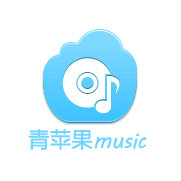
<style>
.page{position:relative;width:181px;height:181px;background:#ffffff}
.page>*{position:absolute;margin:0}
.t1{font:22px "MVBoli";letter-spacing:-0.02em;color:#72d4ff}
.t2{font:22px "AdobeFanHeitiStd-Bold";letter-spacing:-0.02em;color:#72d4ff}
</style>
<div class="page">
<p class="t1" style="left:28px;top:129px;width:119px;height:21px"><span class="t2">青苹果</span>music</p>
</div>
